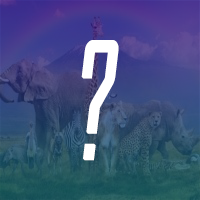
<style>
.page{position:relative;width:200px;height:200px}
.page>*{position:absolute;margin:0}
.t1{font:153.1px "AgencyFB-Reg";letter-spacing:-0.075em;color:#ffffff;font-weight:bold;font-style:italic;scale:0.68 1}
</style>
<div class="page">
<p class="t1" style="left:81px;top:40px;width:38px;height:121px">?</p>
</div>
